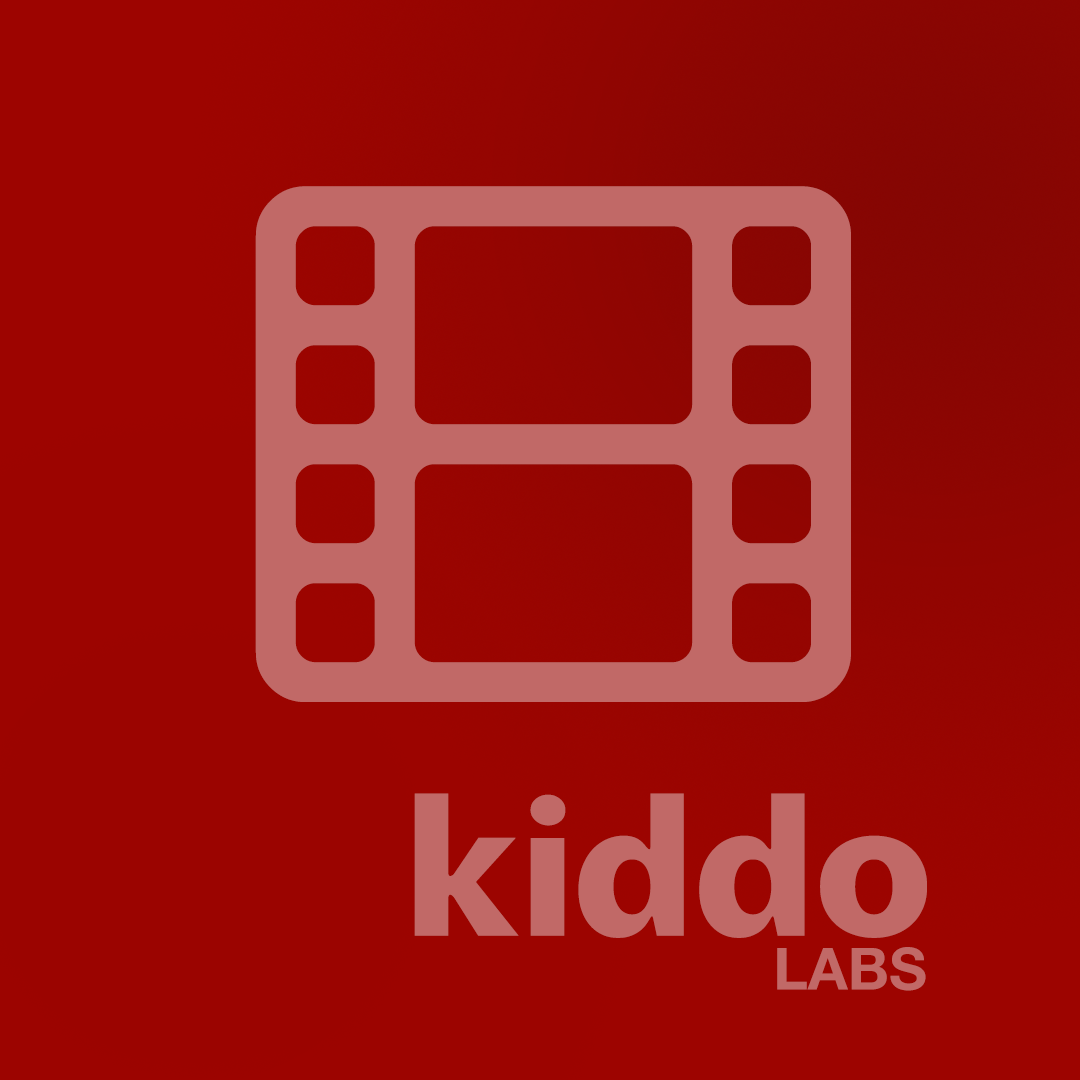
<style>
.page{position:relative;width:1080px;height:1080px}
.page>*{position:absolute;margin:0}
.t1{font:200px "Slippy-Bold";color:#c16967}
.t2{font:58.3px "HelveticaNeue-Bold";color:#c16967}
</style>
<div class="page">
<p class="t1" style="left:414px;top:793px;width:513px;height:145px">kiddo</p>
<p class="t2" style="left:777px;top:947px;width:149px;height:44px">LABS</p>
</div>
